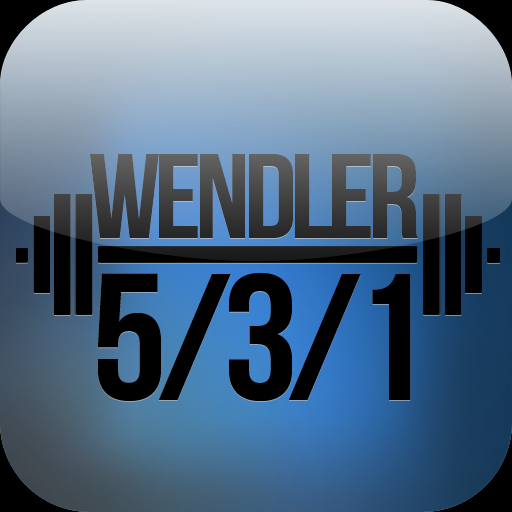
<style>
.page{position:relative;width:512px;height:512px}
.page>*{position:absolute;margin:0}
.t1{font:120px "BebasNeue";letter-spacing:-0.05em;scale:1.07 1}
.t2{font:179.3px "BebasNeue";letter-spacing:-0.05em;color:#000000;scale:1.07 1}
</style>
<div class="page">
<p class="t1" style="left:90px;top:154px;width:328px;height:84px">Wendler</p>
<p class="t2" style="left:98px;top:272px;width:313px;height:129px">5/3/1</p>
</div>
